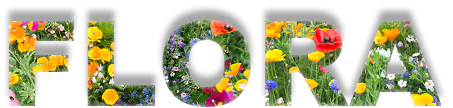
<style>
.page{position:relative;width:453px;height:108px;background:#ffffff}
.page>*{position:absolute;margin:0}
.t1{font:119.3px "Arial-Black"}
</style>
<div class="page">
<p class="t1" style="left:8px;top:20px;width:434px;height:87px">FLORA</p>
</div>
